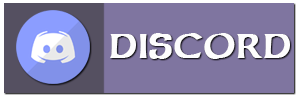
<style>
.page{position:relative;width:300px;height:100px;background:#7f75a0}
.page>*{position:absolute;margin:0}
.t1{font:38px "Sherwood-Regular";color:#fdfdfd}
</style>
<div class="page">
<p class="t1" style="left:110px;top:33px;width:180px;height:26px">DISCORD</p>
</div>
